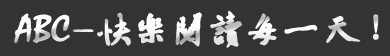
<style>
.page{position:relative;width:390px;height:56px;background:#333333}
.page>*{position:absolute;margin:0}
.t1{font:36.9px "ZIKUTANGSFXST";color:#ffffff;font-weight:bold}
.t2{font:36.9px "ÊéÌå·»Ã×ÜÀÌå";color:#ffffff;font-weight:bold}
</style>
<div class="page">
<p class="t1" style="left:14px;top:10px;width:365px;height:38px"><span class="t2">ABC-</span>快乐阅读每一天！</p>
</div>
